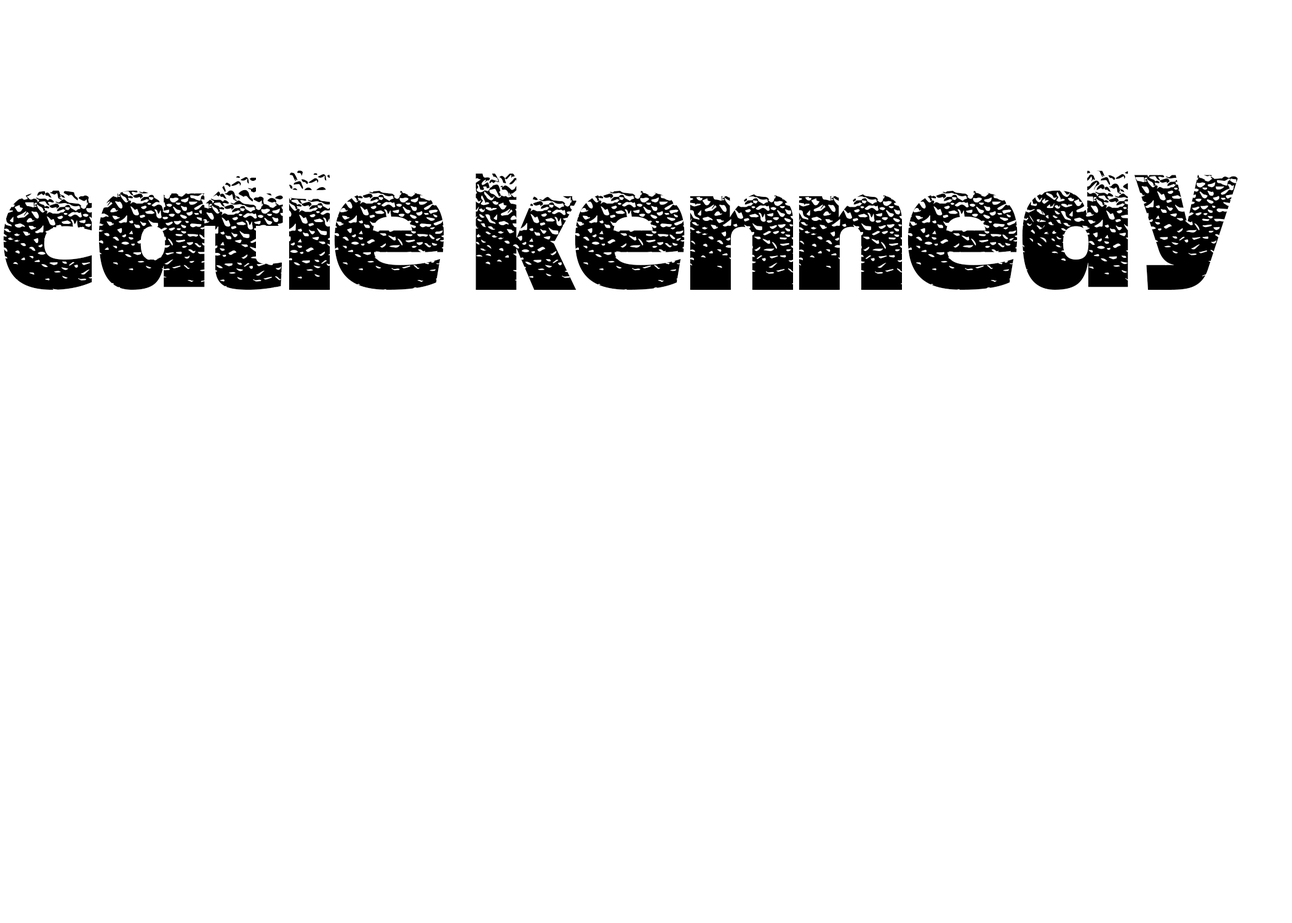
<style>
.page{position:relative;width:1292px;height:923px;background:#ffffff}
.page>*{position:absolute;margin:0}
.t1{font:123.1px "HotSweat";color:#000000}
</style>
<div class="page">
<p class="t1" style="left:3px;top:170px;width:1235px;height:120px">catie kennedy</p>
</div>
